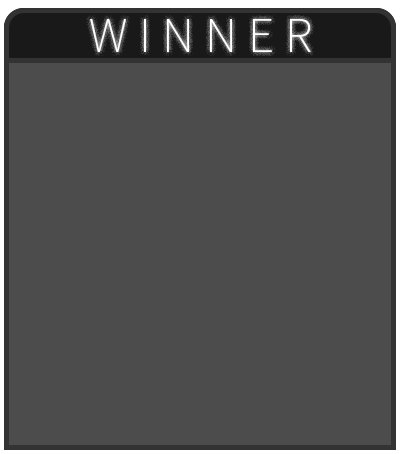
<style>
.page{position:relative;width:400px;height:454px;background:#4c4c4c}
.page>*{position:absolute;margin:0}
.t1{font:46px "NotoSansCJKkr-Thin";letter-spacing:0.24em;color:#ffffff}
</style>
<div class="page">
<p class="t1" style="left:90px;top:19px;width:221px;height:33px">WINNER</p>
</div>
